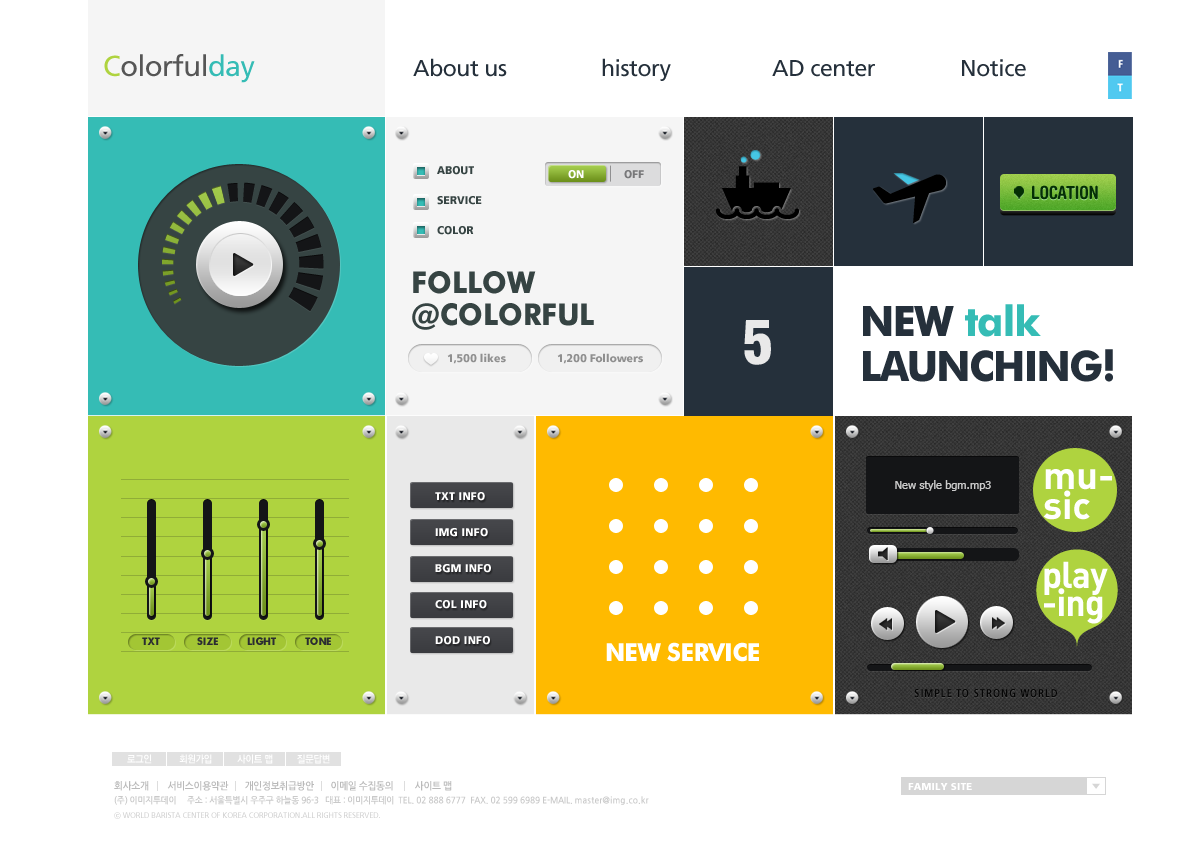
<style>
.page{position:relative;width:1200px;height:850px;background:#ffffff}
.page>*{position:absolute;margin:0}
.t1{font:29px "FrutigerLTStd-Roman";letter-spacing:-0.02em;color:#565656}
.t2{font:29px "FrutigerLTStd-Roman";letter-spacing:-0.02em;color:#afd33f}
.t3{font:29px "FrutigerLTStd-Roman";letter-spacing:-0.02em;color:#35bcb5}
.t4{font:23px "FrutigerLTStd-Roman";letter-spacing:-0.02em;color:#25303b}
.t5{font:11px/30px "Frutiger-Black";letter-spacing:0.01em;color:#364443;text-transform:uppercase;scale:0.95 1}
.t6{font:11px "Frutiger-Black";color:#ffffff;scale:0.97 1}
.t7{font:11px "Frutiger-Black";color:#78787a;scale:0.97 1}
.t8{font:18px "HelveticaRoundedLTStd-BdCn";letter-spacing:-0.01em;color:#052f06}
.t9{font:30px/32px "FuturaBT-Bold";color:#364443;text-transform:uppercase;scale:0.96 1}
.t10{font:42px/45px "FuturaBT-Bold";letter-spacing:-0.03em;color:#25303b;scale:0.96 1}
.t11{font:42px/45px "FuturaBT-Bold";letter-spacing:-0.03em;color:#35bcb5;scale:0.96 1}
.t12{font:67px "Helvetica-Condensed-Black-Se";letter-spacing:0.01em;color:#e9e9e9}
.t13{font:38px/30px "DIN-BoldAlternate";color:#ffffff}
.t14{font:11px "Tahoma";color:#cbcbcb}
.t15{font:11px/36px "Frutiger-Black";letter-spacing:0.03em;color:#ffffff;text-transform:uppercase;scale:0.95 1}
.t16{font:37px/28px "DIN-BoldAlternate";letter-spacing:-0.02em;color:#ffffff;scale:0.96 1}
.t17{font:15px "FuturaBT-Bold";letter-spacing:-0.03em;color:#2b2d31;font-variant:small-caps;scale:0.95 1}
.t18{font:11px "Frutiger-BoldCn";letter-spacing:0.08em;color:#050505;text-transform:uppercase}
.t19{font:10px "NanumGothicBold";letter-spacing:-0.03em;color:#bababa;scale:0.95 1}
.t20{font:9px "NanumGothicBold";letter-spacing:-0.03em;color:#bababa;scale:0.95 1}
.t21{font:9px "NanumGothicBold";letter-spacing:-0.02em;color:#bababa;scale:0.95 1}
.t22{font:9px "NanumGothicBold";letter-spacing:0.02em;color:#bababa;scale:0.95 1}
.t23{font:8px "Frutiger-Roman";letter-spacing:-0.015em;scale:0.94 1}
.t24{font:8px "YGO540";letter-spacing:-0.015em;scale:0.94 1}
</style>
<div class="page">
<p class="t1" style="left:104px;top:54px;width:151px;height:29px"><span class="t2">C</span>olorful<span class="t3">day</span></p>
<p class="t4" style="left:413px;top:58px;width:94px;height:19px">About us</p>
<p class="t4" style="left:602px;top:58px;width:69px;height:23px">history</p>
<p class="t4" style="left:772px;top:60px;width:103px;height:17px">AD center</p>
<p class="t4" style="left:962px;top:59px;width:64px;height:18px">Notice</p>
<p class="t5" style="left:437px;top:166px;width:45px;height:69px">about<br>service<br>color</p>
<p class="t6" style="left:568px;top:170px;width:16px;height:9px">ON</p>
<p class="t7" style="left:624px;top:170px;width:20px;height:9px">OFF</p>
<p class="t8" style="left:1032px;top:185px;width:66px;height:15px">LOCATION</p>
<p class="t9" style="left:412px;top:271px;width:182px;height:59px">follow<br>@colorful</p>
<p class="t10" style="left:863px;top:304px;width:250px;height:78px">NEW<span class="t11"> talk<br></span>LAUNCHING!</p>
<p class="t12" style="left:744px;top:320px;width:27px;height:45px">5</p>
<p class="t13" style="left:1043px;top:469px;width:69px;height:51px">mu-<br>sic</p>
<p class="t14" style="left:895px;top:480px;width:96px;height:11px">New style bgm.mp3</p>
<p class="t15" style="left:435px;top:492px;width:56px;height:153px">txt info<br>img info<br>bgm info<br>col info<br>dod info</p>
<p class="t16" style="left:1044px;top:561px;width:64px;height:63px">play<br>-ing</p>
<p class="t17" style="left:142px;top:637px;width:18px;height:8px">txt</p>
<p class="t17" style="left:197px;top:637px;width:21px;height:8px">size</p>
<p class="t17" style="left:247px;top:637px;width:29px;height:8px">light</p>
<p class="t17" style="left:305px;top:637px;width:26px;height:8px">tone</p>
<p class="t18" style="left:914px;top:689px;width:143px;height:9px">Simple to strong world</p>
<p class="t19" style="left:114px;top:781px;width:338px;height:10px">회사소개        서비스이용약관       개인정보취급방안       이메일 수집동의         사이트 맵</p>
<p class="t20" style="left:114px;top:795px;width:535px;height:10px;opacity:0.8">(주) 이미지투데이     주소 : 서울특별시 우주구 하늘동 96-3   대표 : 이미지투데이  <span class="t21">TEL. 02 888 6777  FAX. 02 599 6989 E-MAIL. </span><span class="t22">master@img.co.kr</span></p>
<p class="t23" style="left:114px;top:812px;width:266px;height:7px"><span class="t24">ⓒ</span> WORLD BARISTA CENTER OF KOREA CORPORATION.ALL RIGHTS RESERVED.</p>
</div>
